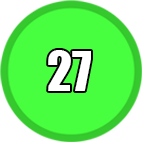
<style>
.page{position:relative;width:142px;height:142px;background:#47ff3e}
.page>*{position:absolute;margin:0}
.t1{font:50px "Impact";color:#ffffff}
</style>
<div class="page">
<p class="t1" style="left:48px;top:50px;width:43px;height:41px">27</p>
</div>
